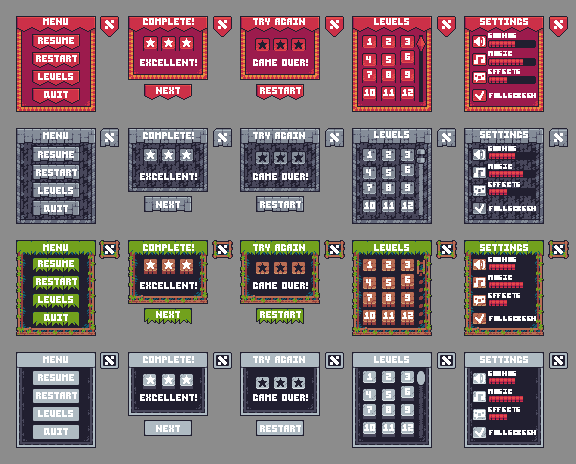
<style>
.page{position:relative;width:576px;height:464px;background:#8c8c8c}
.page>*{position:absolute;margin:0}
.t1{font:10px "TinyFontCraftpixPixel";color:#ffffff}
.t2{font:8px "TinyFontCraftpixPixel";color:#ffffff}
</style>
<div class="page">
<p class="t1" style="left:43px;top:18px;width:25px;height:7px">menu</p>
<p class="t1" style="left:143px;top:18px;width:51px;height:7px">complete!</p>
<p class="t1" style="left:253px;top:18px;width:52px;height:7px">try again</p>
<p class="t1" style="left:374px;top:18px;width:35px;height:7px">levels</p>
<p class="t1" style="left:480px;top:18px;width:48px;height:7px">settings</p>
<p class="t1" style="left:38px;top:37px;width:36px;height:7px">resume</p>
<p class="t1" style="left:367px;top:38px;width:5px;height:7px">1</p>
<p class="t1" style="left:386px;top:38px;width:5px;height:7px">2</p>
<p class="t1" style="left:405px;top:38px;width:5px;height:7px">3</p>
<p class="t2" style="left:488px;top:33px;width:28px;height:5px">sounds</p>
<p class="t1" style="left:405px;top:53px;width:5px;height:7px">6</p>
<p class="t2" style="left:488px;top:51px;width:24px;height:5px">music</p>
<p class="t1" style="left:36px;top:55px;width:41px;height:7px">restart</p>
<p class="t1" style="left:140px;top:59px;width:57px;height:7px">excellent!</p>
<p class="t1" style="left:253px;top:59px;width:55px;height:7px">game over!</p>
<p class="t1" style="left:366px;top:56px;width:5px;height:7px">4</p>
<p class="t1" style="left:386px;top:56px;width:5px;height:7px">5</p>
<p class="t1" style="left:38px;top:73px;width:35px;height:7px">levels</p>
<p class="t1" style="left:367px;top:71px;width:5px;height:7px">7</p>
<p class="t1" style="left:386px;top:71px;width:5px;height:7px">8</p>
<p class="t1" style="left:405px;top:71px;width:5px;height:7px">9</p>
<p class="t2" style="left:488px;top:69px;width:32px;height:5px">effects</p>
<p class="t1" style="left:156px;top:87px;width:24px;height:7px">next</p>
<p class="t1" style="left:260px;top:87px;width:41px;height:7px">restart</p>
<p class="t1" style="left:364px;top:89px;width:11px;height:7px">10</p>
<p class="t1" style="left:383px;top:89px;width:11px;height:7px">11</p>
<p class="t1" style="left:402px;top:89px;width:11px;height:7px">12</p>
<p class="t1" style="left:44px;top:91px;width:24px;height:7px">quit</p>
<p class="t2" style="left:489px;top:93px;width:47px;height:5px">fullscreen</p>
<p class="t1" style="left:43px;top:132px;width:25px;height:7px">menu</p>
<p class="t1" style="left:143px;top:132px;width:51px;height:7px">complete!</p>
<p class="t1" style="left:253px;top:132px;width:52px;height:7px">try again</p>
<p class="t1" style="left:374px;top:131px;width:35px;height:7px">levels</p>
<p class="t1" style="left:480px;top:131px;width:48px;height:7px">settings</p>
<p class="t2" style="left:488px;top:146px;width:28px;height:5px">sounds</p>
<p class="t1" style="left:38px;top:151px;width:36px;height:7px">resume</p>
<p class="t1" style="left:367px;top:151px;width:5px;height:7px">1</p>
<p class="t1" style="left:386px;top:151px;width:5px;height:7px">2</p>
<p class="t1" style="left:405px;top:151px;width:5px;height:7px">3</p>
<p class="t1" style="left:36px;top:169px;width:41px;height:7px">restart</p>
<p class="t1" style="left:140px;top:173px;width:57px;height:7px">excellent!</p>
<p class="t1" style="left:253px;top:173px;width:55px;height:7px">game over!</p>
<p class="t1" style="left:366px;top:169px;width:5px;height:7px">4</p>
<p class="t1" style="left:386px;top:169px;width:5px;height:7px">5</p>
<p class="t1" style="left:405px;top:166px;width:5px;height:7px">6</p>
<p class="t2" style="left:488px;top:164px;width:24px;height:5px">music</p>
<p class="t1" style="left:367px;top:184px;width:5px;height:7px">7</p>
<p class="t1" style="left:386px;top:184px;width:5px;height:7px">8</p>
<p class="t1" style="left:405px;top:184px;width:5px;height:7px">9</p>
<p class="t2" style="left:488px;top:182px;width:32px;height:5px">effects</p>
<p class="t1" style="left:38px;top:187px;width:35px;height:7px">levels</p>
<p class="t1" style="left:44px;top:205px;width:24px;height:7px">quit</p>
<p class="t1" style="left:156px;top:201px;width:24px;height:7px">next</p>
<p class="t1" style="left:260px;top:201px;width:41px;height:7px">restart</p>
<p class="t1" style="left:364px;top:202px;width:11px;height:7px">10</p>
<p class="t1" style="left:383px;top:202px;width:11px;height:7px">11</p>
<p class="t1" style="left:402px;top:202px;width:11px;height:7px">12</p>
<p class="t2" style="left:489px;top:206px;width:47px;height:5px">fullscreen</p>
<p class="t1" style="left:43px;top:244px;width:25px;height:7px">menu</p>
<p class="t1" style="left:143px;top:244px;width:51px;height:7px">complete!</p>
<p class="t1" style="left:253px;top:244px;width:52px;height:7px">try again</p>
<p class="t1" style="left:374px;top:244px;width:35px;height:7px">levels</p>
<p class="t1" style="left:480px;top:244px;width:48px;height:7px">settings</p>
<p class="t2" style="left:488px;top:257px;width:28px;height:5px">sounds</p>
<p class="t1" style="left:38px;top:260px;width:36px;height:7px">resume</p>
<p class="t1" style="left:367px;top:261px;width:5px;height:7px">1</p>
<p class="t1" style="left:386px;top:261px;width:5px;height:7px">2</p>
<p class="t1" style="left:405px;top:261px;width:5px;height:7px">3</p>
<p class="t1" style="left:36px;top:278px;width:41px;height:7px">restart</p>
<p class="t1" style="left:366px;top:279px;width:5px;height:7px">4</p>
<p class="t1" style="left:386px;top:279px;width:5px;height:7px">5</p>
<p class="t1" style="left:405px;top:276px;width:5px;height:7px">6</p>
<p class="t2" style="left:488px;top:275px;width:24px;height:5px">music</p>
<p class="t1" style="left:140px;top:282px;width:57px;height:7px">excellent!</p>
<p class="t1" style="left:253px;top:282px;width:55px;height:7px">game over!</p>
<p class="t1" style="left:367px;top:294px;width:5px;height:7px">7</p>
<p class="t1" style="left:386px;top:294px;width:5px;height:7px">8</p>
<p class="t1" style="left:405px;top:294px;width:5px;height:7px">9</p>
<p class="t2" style="left:488px;top:293px;width:32px;height:5px">effects</p>
<p class="t1" style="left:38px;top:296px;width:35px;height:7px">levels</p>
<p class="t1" style="left:44px;top:314px;width:24px;height:7px">quit</p>
<p class="t1" style="left:156px;top:311px;width:24px;height:7px">next</p>
<p class="t1" style="left:260px;top:311px;width:41px;height:7px">restart</p>
<p class="t1" style="left:364px;top:312px;width:11px;height:7px">10</p>
<p class="t1" style="left:383px;top:312px;width:11px;height:7px">11</p>
<p class="t1" style="left:402px;top:312px;width:11px;height:7px">12</p>
<p class="t2" style="left:489px;top:316px;width:47px;height:5px">fullscreen</p>
<p class="t1" style="left:43px;top:356px;width:25px;height:7px">menu</p>
<p class="t1" style="left:143px;top:356px;width:51px;height:7px">complete!</p>
<p class="t1" style="left:253px;top:356px;width:52px;height:7px">try again</p>
<p class="t1" style="left:374px;top:356px;width:35px;height:7px">levels</p>
<p class="t1" style="left:480px;top:356px;width:48px;height:7px">settings</p>
<p class="t1" style="left:38px;top:374px;width:36px;height:7px">resume</p>
<p class="t1" style="left:367px;top:373px;width:5px;height:7px">1</p>
<p class="t1" style="left:386px;top:373px;width:5px;height:7px">2</p>
<p class="t1" style="left:405px;top:373px;width:5px;height:7px">3</p>
<p class="t2" style="left:488px;top:371px;width:28px;height:5px">sounds</p>
<p class="t1" style="left:405px;top:388px;width:5px;height:7px">6</p>
<p class="t2" style="left:488px;top:389px;width:24px;height:5px">music</p>
<p class="t1" style="left:36px;top:392px;width:41px;height:7px">restart</p>
<p class="t1" style="left:140px;top:394px;width:57px;height:7px">excellent!</p>
<p class="t1" style="left:253px;top:394px;width:55px;height:7px">game over!</p>
<p class="t1" style="left:366px;top:391px;width:5px;height:7px">4</p>
<p class="t1" style="left:386px;top:391px;width:5px;height:7px">5</p>
<p class="t1" style="left:38px;top:410px;width:35px;height:7px">levels</p>
<p class="t1" style="left:367px;top:406px;width:5px;height:7px">7</p>
<p class="t1" style="left:386px;top:406px;width:5px;height:7px">8</p>
<p class="t1" style="left:405px;top:406px;width:5px;height:7px">9</p>
<p class="t2" style="left:488px;top:407px;width:32px;height:5px">effects</p>
<p class="t1" style="left:156px;top:425px;width:24px;height:7px">next</p>
<p class="t1" style="left:260px;top:425px;width:41px;height:7px">restart</p>
<p class="t1" style="left:364px;top:424px;width:11px;height:7px">10</p>
<p class="t1" style="left:383px;top:424px;width:11px;height:7px">11</p>
<p class="t1" style="left:402px;top:424px;width:11px;height:7px">12</p>
<p class="t1" style="left:44px;top:428px;width:24px;height:7px">quit</p>
<p class="t2" style="left:489px;top:430px;width:47px;height:5px">fullscreen</p>
</div>
